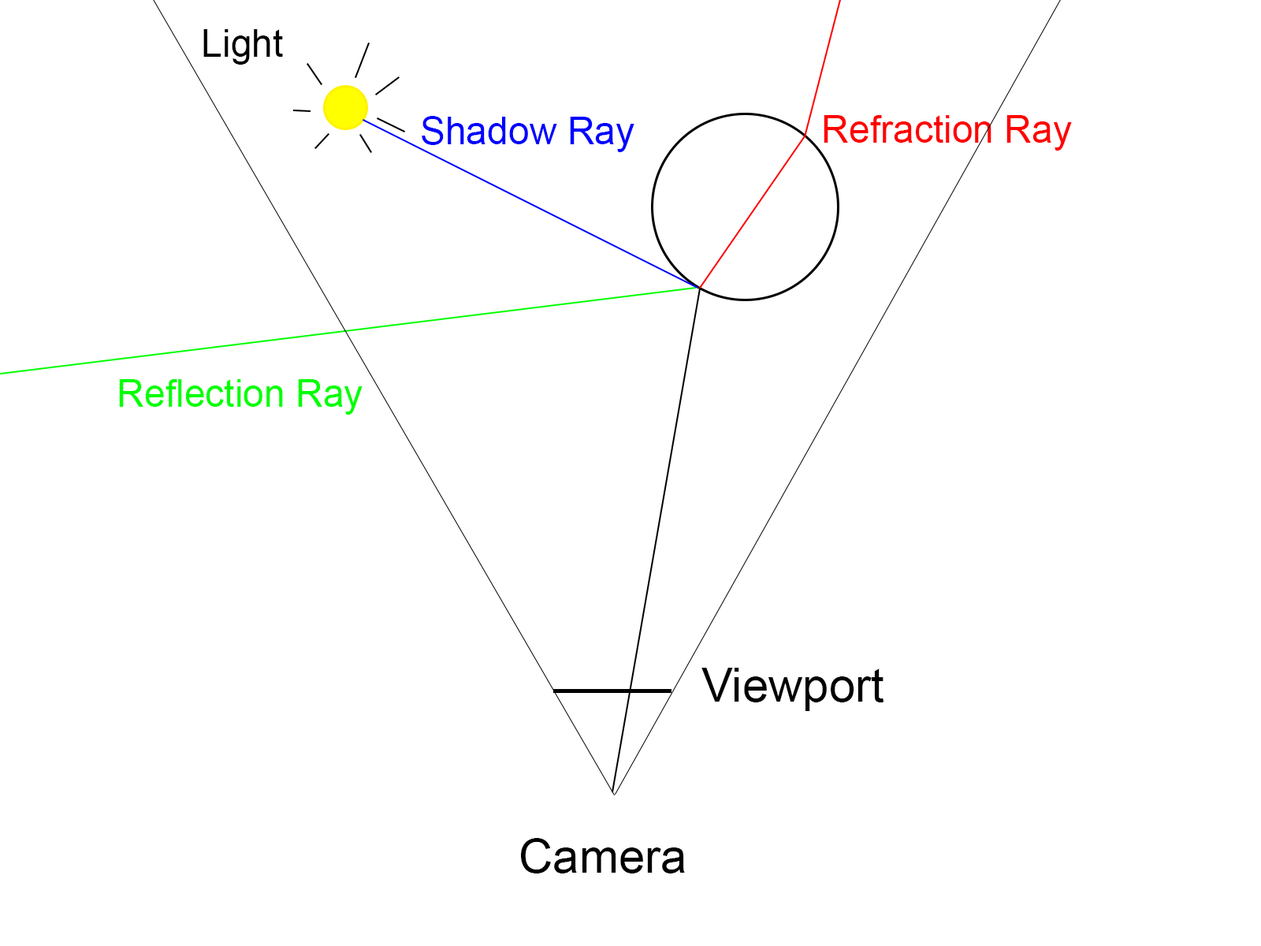
<style>
.page{position:relative;width:1261px;height:946px;background:#ffffff}
.page>*{position:absolute;margin:0}
.t1{font:37.8px "ArialMT";color:#000000}
.t2{font:37.8px "ArialMT";color:#0000ff}
.t3{font:37.8px "ArialMT";color:#ff0000}
.t4{font:37.8px "ArialMT";color:#00ff00}
.t5{font:47.3px "ArialMT";color:#000000}
</style>
<div class="page">
<p class="t1" style="left:203px;top:29px;width:80px;height:36px">Light</p>
<p class="t2" style="left:422px;top:116px;width:212px;height:36px">Shadow Ray</p>
<p class="t3" style="left:824px;top:115px;width:248px;height:36px">Refraction Ray</p>
<p class="t4" style="left:119px;top:379px;width:244px;height:36px">Reflection Ray</p>
<p class="t5" style="left:701px;top:667px;width:183px;height:44px">Viewport</p>
<p class="t5" style="left:521px;top:838px;width:164px;height:35px">Camera</p>
</div>
